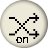
<style>
.page{position:relative;width:48px;height:48px;background:#ece9d8}
.page>*{position:absolute;margin:0}
.t1{font:11px "DejaVuSans";color:#000000}
</style>
<div class="page">
<p class="t1" style="left:16px;top:36px;width:13px;height:8px">on</p>
</div>
